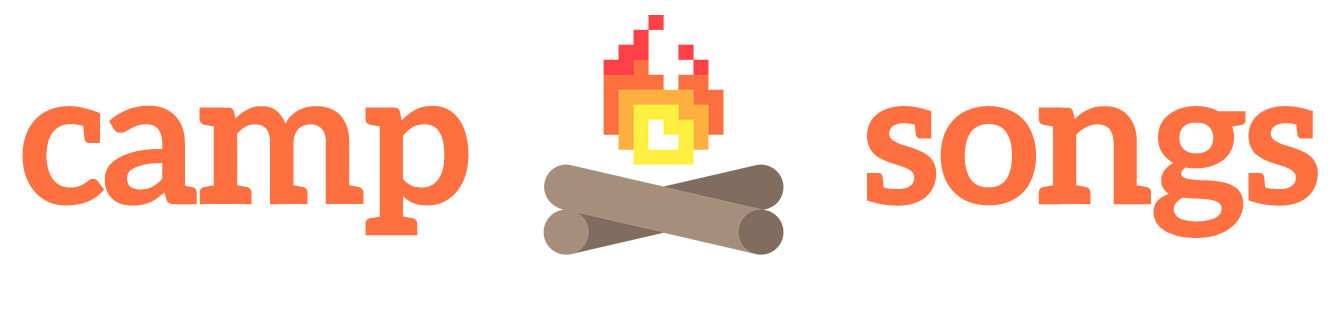
<style>
.page{position:relative;width:1340px;height:312px;background:#ffffff}
.page>*{position:absolute;margin:0}
.t1{font:187.5px "Aleo-Bold";letter-spacing:-0.02em;color:#ff7040}
</style>
<div class="page">
<p class="t1" style="left:22px;top:105px;width:1296px;height:133px">camp          songs</p>
</div>
